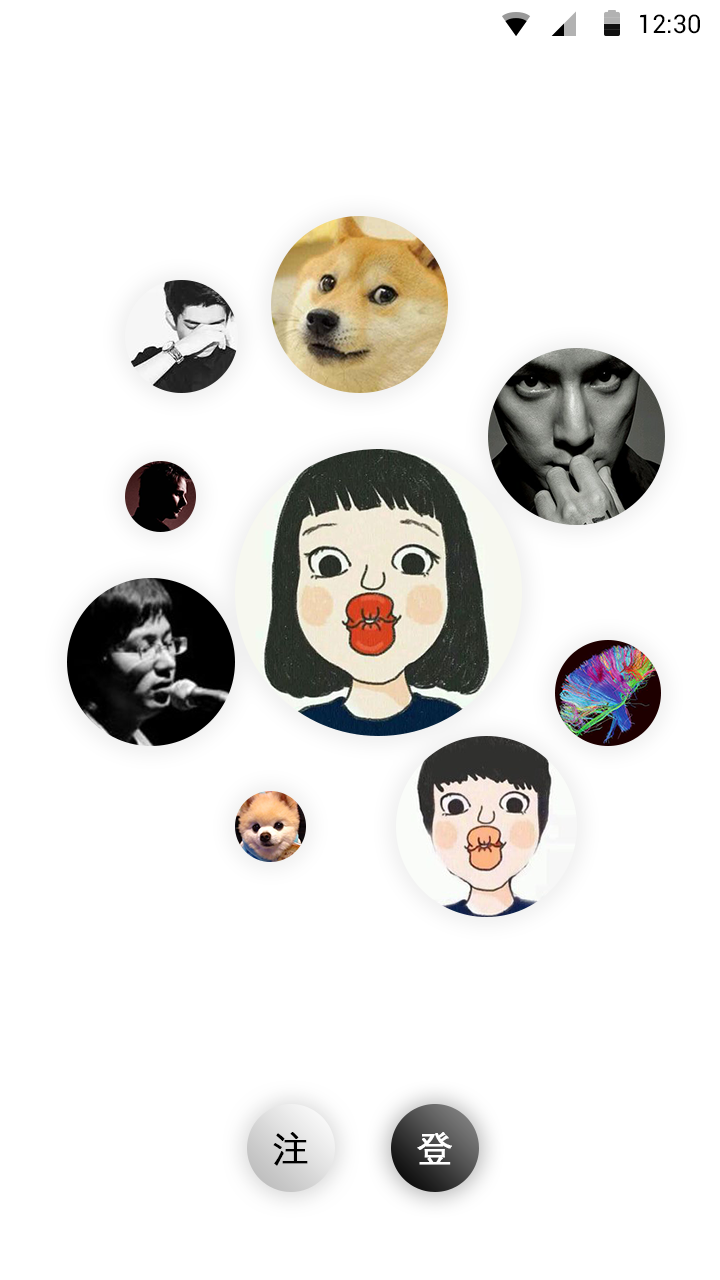
<style>
.page{position:relative;width:720px;height:1280px;background:#ffffff}
.page>*{position:absolute;margin:0}
.t1{font:25.4px "Roboto-Regular";color:#000000}
.t2{font:36px "DengXian-Regular";color:#000000;font-weight:bold}
.t3{font:36px "DengXian-Regular";color:#ffffff;font-weight:bold}
</style>
<div class="page">
<p class="t1" style="left:640px;top:14px;width:60px;height:20px">12:30</p>
<p class="t2" style="left:273px;top:1132px;width:35px;height:34px">注</p>
<p class="t3" style="left:417px;top:1132px;width:35px;height:33px">登</p>
</div>
